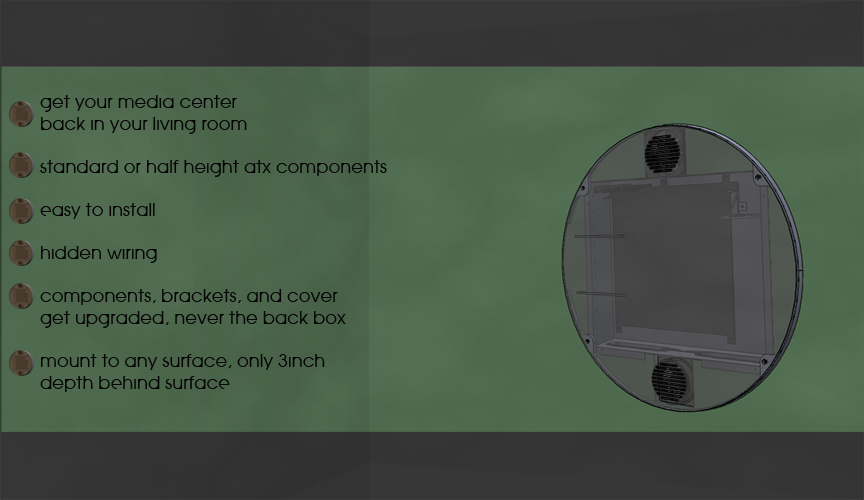
<style>
.page{position:relative;width:864px;height:500px}
.page>*{position:absolute;margin:0}
.t1{font:18px "SeraphicOrganism";color:#040404}
</style>
<div class="page">
<p class="t1" style="left:40px;top:95px;width:347px;height:297px">get Your Media Center<br>Back In Your Living Room<br><br>Standard or half height ATX Components<br><br>Easy to Install<br><br>Hidden Wiring<br><br>Components, Brackets, and cover<br>Get Upgraded, Never the back Box<br><br>Mount to any Surface, Only 3inch <br>depth BEHIND SURFACE</p>
</div>
